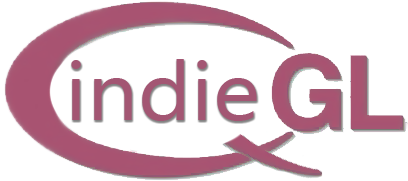
<style>
.page{position:relative;width:408px;height:181px;background:#ffffff}
.page>*{position:absolute;margin:0}
.t1{font:82px "SegoeUI";color:#a35673;scale:1.1 1}
</style>
<div class="page">
<p class="t1" style="left:71px;top:59px;width:186px;height:62px">indie</p>
</div>
